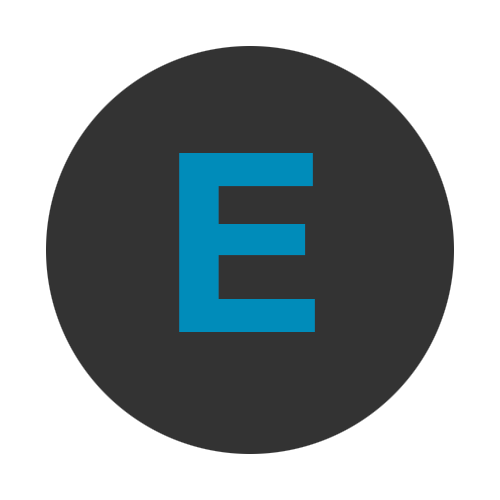
<style>
.page{position:relative;width:500px;height:500px;background:#ffffff}
.page>*{position:absolute;margin:0}
.t1{font:250px "HelveticaNeue-Bold";color:#008cba}
</style>
<div class="page">
<p class="t1" style="left:179px;top:153px;width:136px;height:179px">E</p>
</div>
